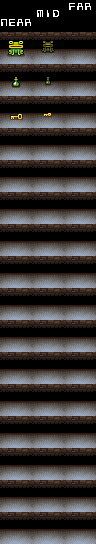
<style>
.page{position:relative;width:96px;height:544px;background:#000000}
.page>*{position:absolute;margin:0}
.t1{font:8px "Aliens";color:#ffffff;text-transform:uppercase}
</style>
<div class="page">
<p class="t1" style="left:69px;top:3px;width:22px;height:7px">far</p>
<p class="t1" style="left:37px;top:10px;width:22px;height:7px">mid</p>
<p class="t1" style="left:1px;top:19px;width:30px;height:7px">near</p>
</div>
